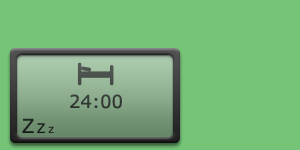
<style>
.page{position:relative;width:300px;height:150px;background:#75c477}
.page>*{position:absolute;margin:0}
.t1{font:18px "Verdana";color:#343a35}
.t2{font:19.3px "Verdana";color:#1a1f1a}
.t3{font:13.2px "Verdana";color:#151b16}
.t4{font:8.4px "Verdana";color:#171d17}
</style>
<div class="page">
<p class="t1" style="left:70px;top:94px;width:52px;height:15px">24:00</p>
<p class="t2" style="left:22px;top:118px;width:12px;height:15px">Z</p>
<p class="t3" style="left:37px;top:123px;width:8px;height:10px">Z</p>
<p class="t4" style="left:48px;top:126px;width:6px;height:7px">Z</p>
</div>
